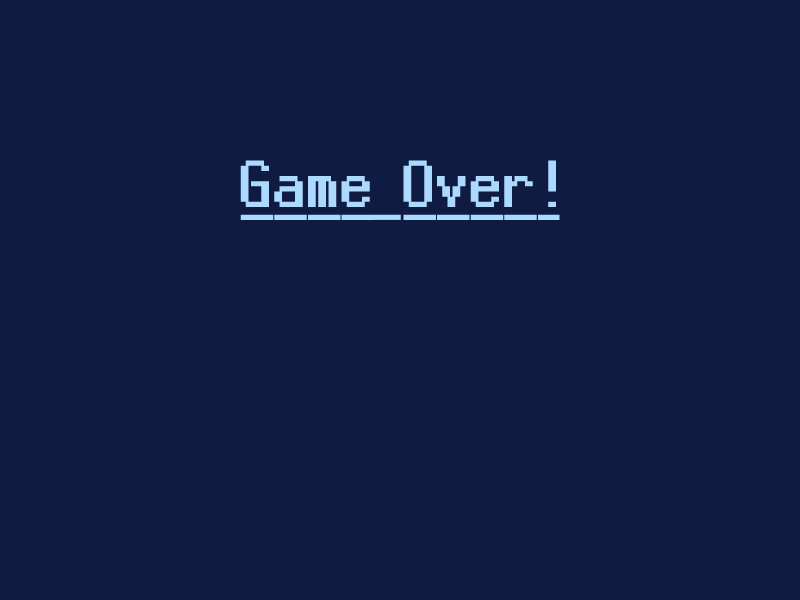
<style>
.page{position:relative;width:800px;height:600px;background:#101b41}
.page>*{position:absolute;margin:0}
.t1{font:98px "Silver";color:#acd9ff;font-weight:bold;text-decoration:underline}
</style>
<div class="page">
<p class="t1" style="left:240px;top:160px;width:320px;height:60px">Game Over!</p>
</div>
